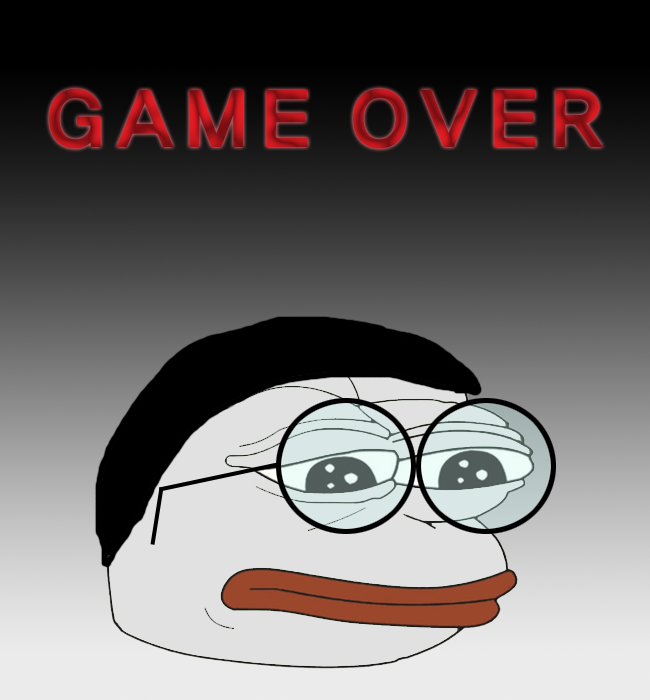
<style>
.page{position:relative;width:650px;height:700px}
.page>*{position:absolute;margin:0}
.t1{font:80px "HaanYGodic25"}
</style>
<div class="page">
<p class="t1" style="left:49px;top:88px;width:554px;height:61px">GAME OVER</p>
</div>
